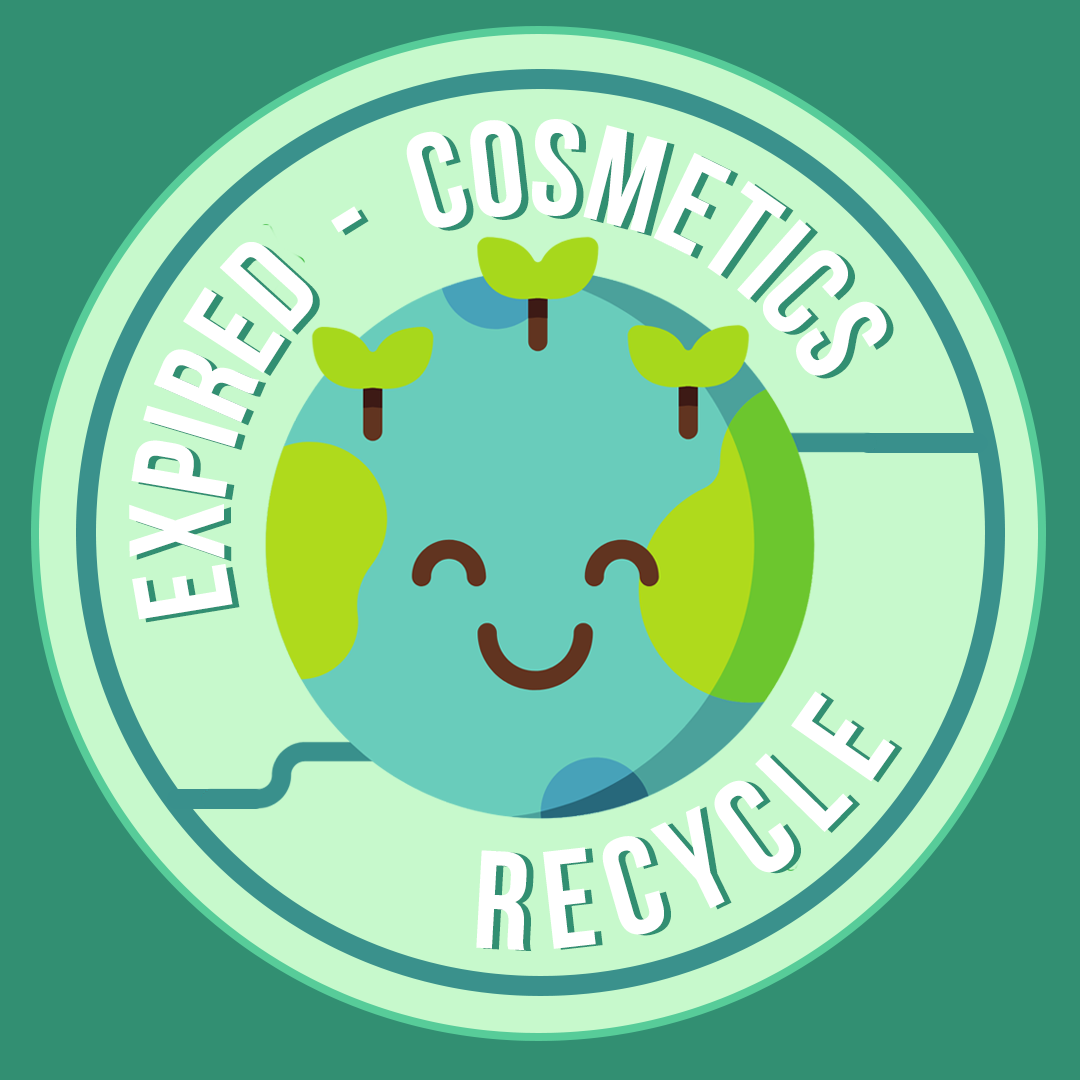
<style>
.page{position:relative;width:1080px;height:1080px;background:#c7f9cc}
.page>*{position:absolute;margin:0}
.t1{font:135.8px "UTM-Bebas";color:#ffffff}
.t2{font:138.7px "UTM-Bebas";color:#ffffff}
</style>
<div class="page">
<p class="t1" style="left:129px;top:119px;width:758px;height:501px;rotate:-42deg">expired  -  cosmetics</p>
<p class="t2" style="left:476px;top:691px;width:420px;height:260px;rotate:-15deg">r e c y c l e</p>
</div>
